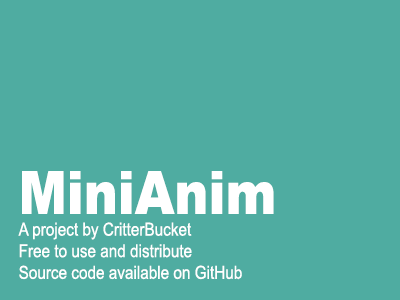
<style>
.page{position:relative;width:400px;height:300px;background:#4faca1}
.page>*{position:absolute;margin:0}
.t1{font:18px "ArialMT";color:#ffffff;scale:0.85 1}
.t2{font:60px "Arial-Black";color:#ffffff;scale:0.85 1}
</style>
<div class="page">
<p class="t1" style="left:18px;top:171px;width:256px;height:109px"><span class="t2">MiniAnim<br></span>A project by CritterBucket<br>Free to use and distribute<br>Source code available on GitHub</p>
</div>
